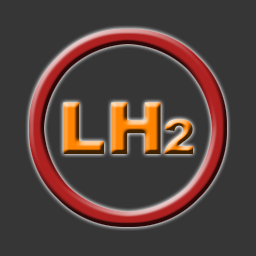
<style>
.page{position:relative;width:256px;height:256px;background:#363636}
.page>*{position:absolute;margin:0}
.t1{font:72px "Arial-Black"}
.t2{font:48px "Arial-Black"}
</style>
<div class="page">
<p class="t1" style="left:63px;top:102px;width:98px;height:52px">LH</p>
<p class="t2" style="left:164px;top:119px;width:29px;height:35px">2</p>
</div>
